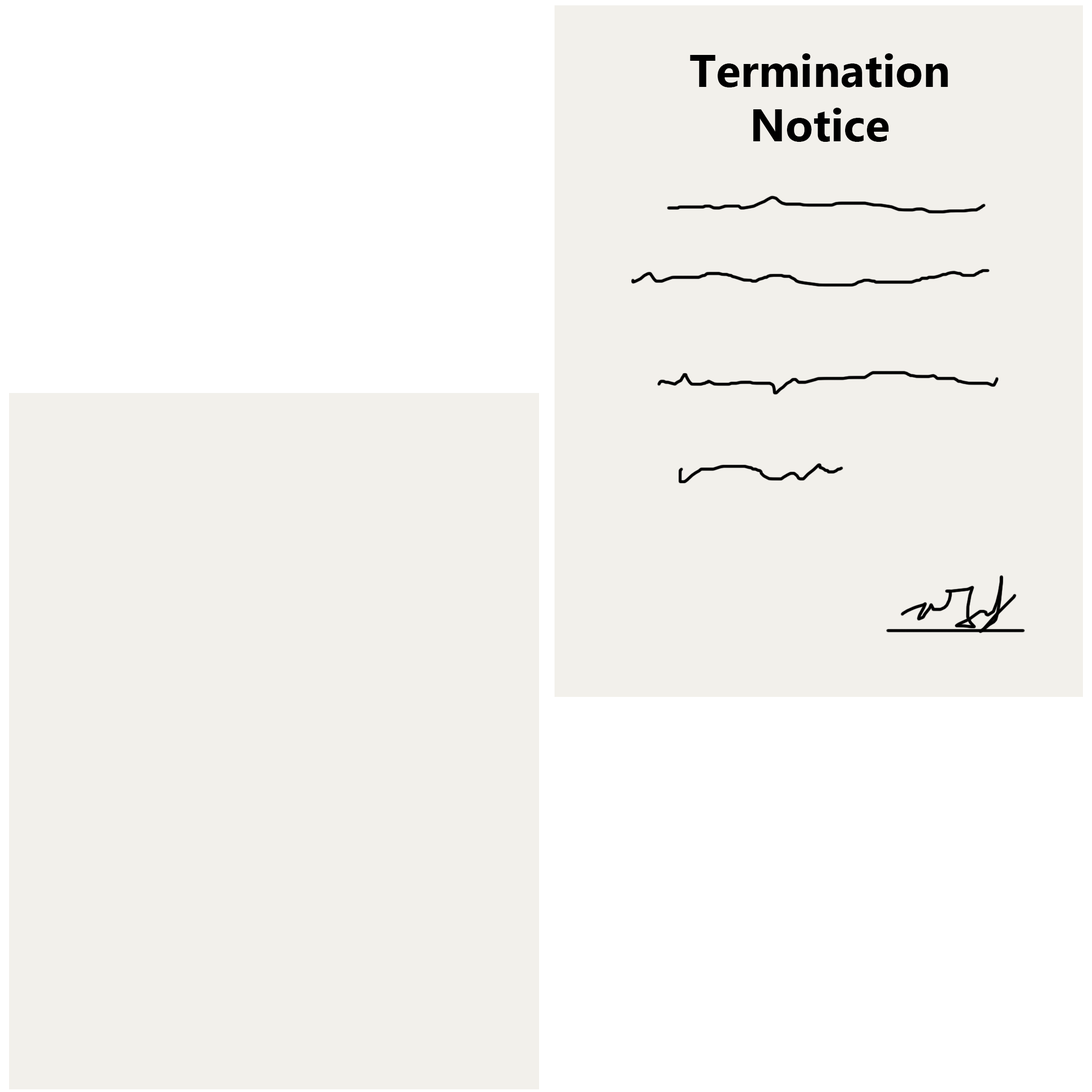
<style>
.page{position:relative;width:1092px;height:1092px;background:#f2f0eb}
.page>*{position:absolute;margin:0}
.t1{font:45.3px "MicrosoftNewTaiLue-Bold";color:#000000}
</style>
<div class="page">
<p class="t1" style="left:690px;top:53px;width:258px;height:89px;text-align:justify">Termination<br>Notice</p>
</div>
